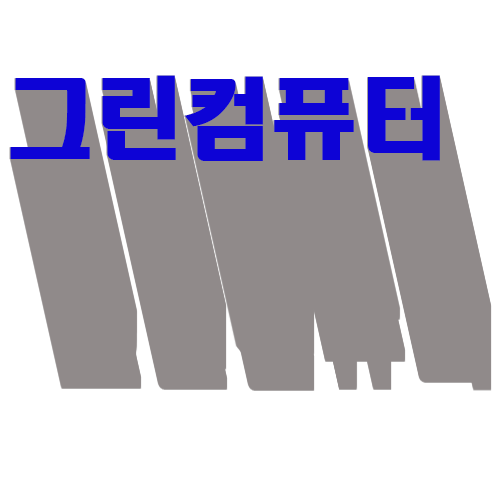
<style>
.page{position:relative;width:500px;height:500px;background:#ffffff}
.page>*{position:absolute;margin:0}
.t1{font:90px "HeadlineR-HM";letter-spacing:-0.02em;color:#0d03d6}
</style>
<div class="page">
<p class="t1" style="left:10px;top:75px;width:430px;height:86px">그린컴퓨터</p>
</div>
